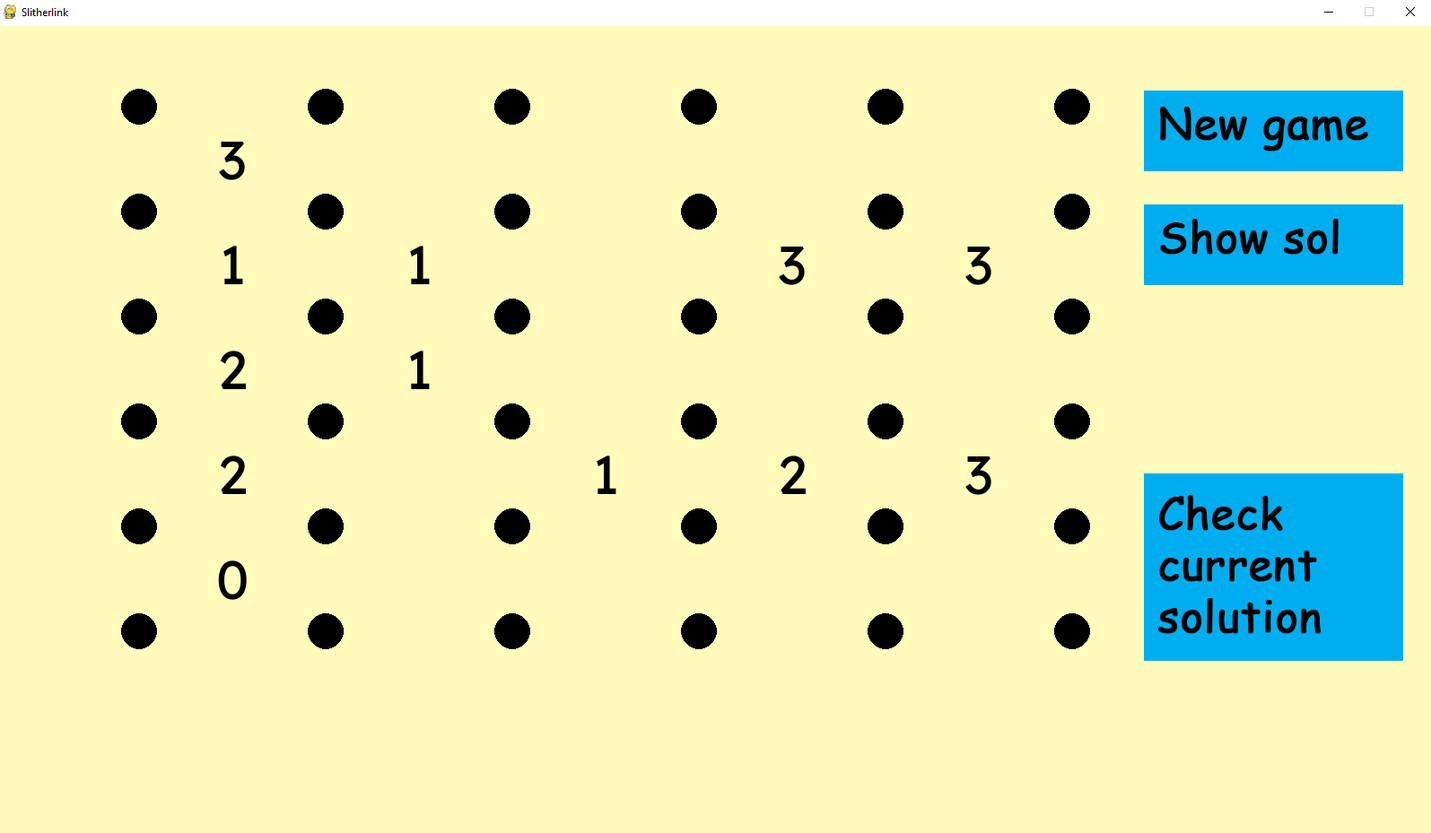
<style>
.page{position:relative;width:1431px;height:833px;background:#fffbbb}
.page>*{position:absolute;margin:0}
.t1{font:43.1px "ComicSansMS";color:#000000;font-weight:bold}
</style>
<div class="page">
<p class="t1" style="left:1159px;top:107px;width:209px;height:45px">New game</p>
<p class="t1" style="left:1160px;top:219px;width:178px;height:36px">Show sol</p>
<p class="t1" style="left:1158px;top:495px;width:162px;height:139px">Check<br>current<br>solution</p>
</div>
